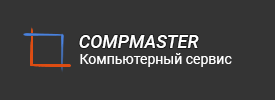
<style>
.page{position:relative;width:275px;height:100px;background:#343434}
.page>*{position:absolute;margin:0}
.t1{font:18px "Roboto-MediumItalic";color:#fefefe}
.t2{font:14px "Roboto-Regular";color:#ffffff}
</style>
<div class="page">
<p class="t1" style="left:79px;top:35px;width:120px;height:13px">COMPMASTER</p>
<p class="t2" style="left:80px;top:53px;width:152px;height:14px">Компьютерный сервис</p>
</div>
